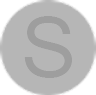
<style>
.page{position:relative;width:96px;height:95px;background:#b6b6b6}
.page>*{position:absolute;margin:0}
.t1{font:83.3px "ArialMT";color:#9e9e9e}
</style>
<div class="page">
<p class="t1" style="left:24px;top:16px;width:48px;height:62px">S</p>
</div>
